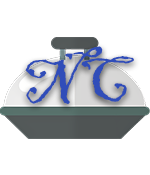
<style>
.page{position:relative;width:150px;height:175px;background:#ffffff}
.page>*{position:absolute;margin:0}
.t1{font:67.7px "BlackadderITC-Regular";color:#304db9}
</style>
<div class="page">
<p class="t1" style="left:25px;top:46px;width:109px;height:58px">NC</p>
</div>
